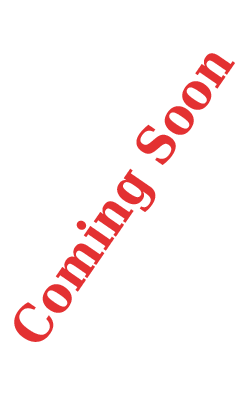
<style>
.page{position:relative;width:249px;height:400px;background:#ffffff}
.page>*{position:absolute;margin:0}
.t1{font:52px "DejaVuSerifCondensed-Bold";color:#e33132}
</style>
<div class="page">
<p class="t1" style="left:14px;top:53px;width:221px;height:289px;rotate:-55deg">Coming Soon</p>
</div>
